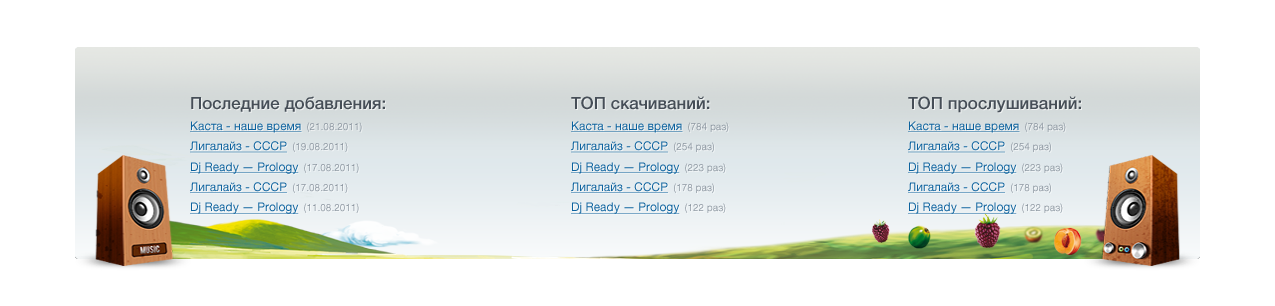
<style>
.page{position:relative;width:1275px;height:306px;background:#ffffff}
.page>*{position:absolute;margin:0}
.t1{font:17px/17px "HelveticaNeueLTStd-Medium";color:#464e57}
.t2{font:12px/20.4px "HelveticaNeueLTStd";color:#0c629e;text-decoration:underline}
.t3{font:10px/20.4px "HelveticaNeueLTStd";color:#8d97a1}
.t4{font:12px/18px "HelveticaNeueLTStd";color:#0c629e;text-decoration:underline}
</style>
<div class="page">
<p class="t1" style="left:190px;top:96px;width:195px;height:118px">Последние добавления:<br><span class="t2">Каста - наше время</span><span class="t3">  (21.08.2011)<br></span><span class="t4">Лигалайз - СССР</span><span class="t3">  (19.08.2011)<br></span><span class="t4">Dj Ready — Prology</span><span class="t3">  (17.08.2011)<br></span><span class="t4">Лигалайз - СССР</span><span class="t3">  (17.08.2011)<br></span><span class="t4">Dj Ready — Prology</span><span class="t3">  (11.08.2011)</span></p>
<p class="t2" style="left:571px;top:96px;width:158px;height:118px"><span class="t1">ТОП скачиваний:<br></span>Каста - наше время<span class="t3">  (784 раз)<br></span><span class="t4">Лигалайз - СССР</span><span class="t3">  (254 раз)<br></span><span class="t4">Dj Ready — Prology</span><span class="t3">  (223 раз)<br></span><span class="t4">Лигалайз - СССР</span><span class="t3">  (178 раз)<br></span><span class="t4">Dj Ready — Prology</span><span class="t3">  (122 раз)</span></p>
<p class="t1" style="left:908px;top:96px;width:173px;height:118px">ТОП прослушиваний:<br><span class="t2">Каста - наше время</span><span class="t3">  (784 раз)<br></span><span class="t4">Лигалайз - СССР</span><span class="t3">  (254 раз)<br></span><span class="t4">Dj Ready — Prology</span><span class="t3">  (223 раз)<br></span><span class="t4">Лигалайз - СССР</span><span class="t3">  (178 раз)<br></span><span class="t4">Dj Ready — Prology</span><span class="t3">  (122 раз)</span></p>
</div>
